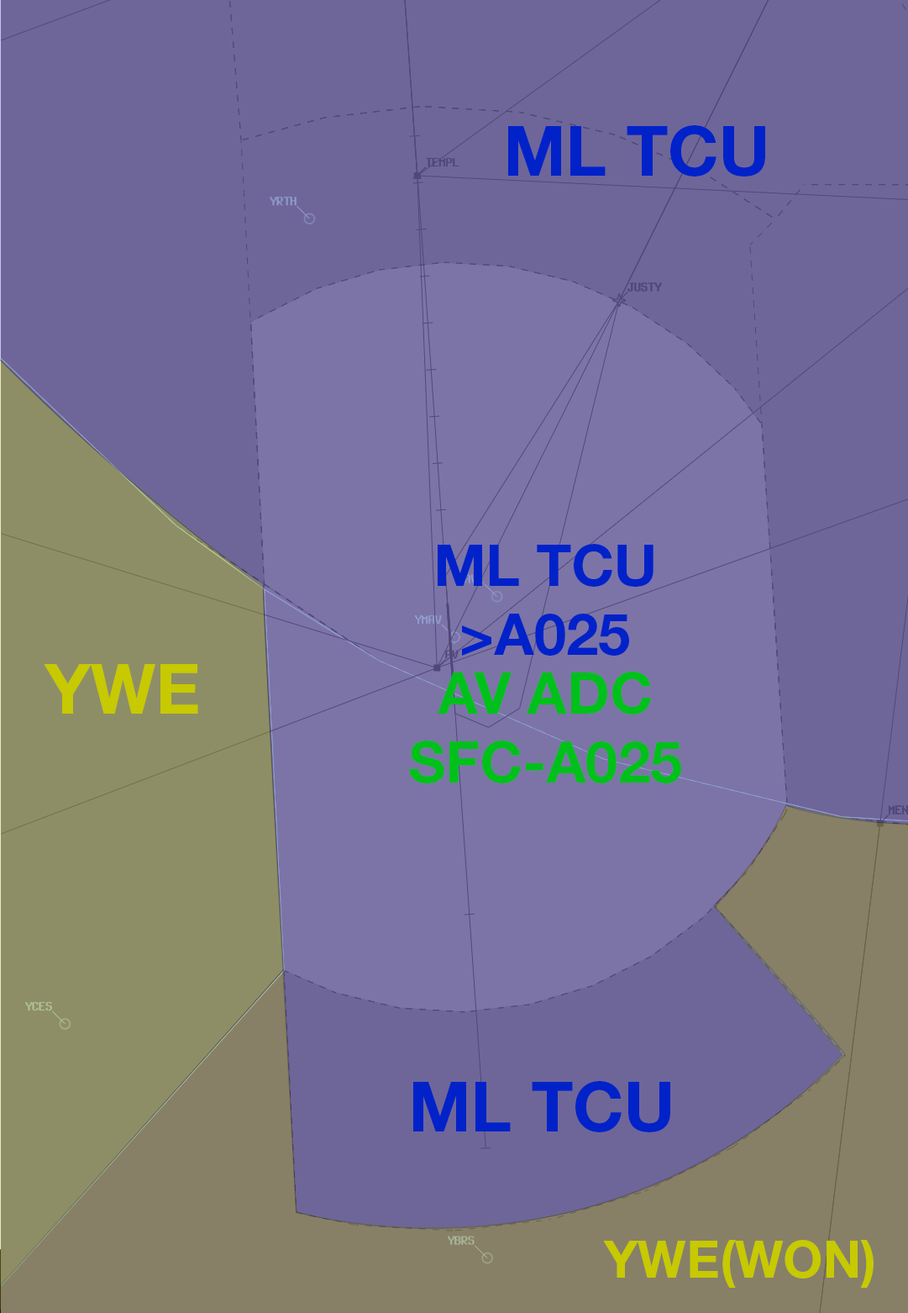
<style>
.page{position:relative;width:908px;height:1313px;background:#6e6699}
.page>*{position:absolute;margin:0}
.t1{font:69px "HelveticaNeueLTStd-Bd";color:#0122c9}
.t2{font:57.8px "HelveticaNeueLTStd-Bd";color:#0122c9}
.t3{font:69px "HelveticaNeueLTStd-Bd";color:#c7c901}
.t4{font:57.8px "HelveticaNeueLTStd-Bd";color:#00c01b}
.t5{font:51.4px "HelveticaNeueLTStd-Bd";color:#c7c901}
</style>
<div class="page">
<p class="t1" style="left:508px;top:125px;width:258px;height:51px">ML TCU</p>
<p class="t2" style="left:438px;top:544px;width:216px;height:111px;text-align:center">ML TCU<br>&gt;A025</p>
<p class="t3" style="left:44px;top:664px;width:154px;height:49px">YWE</p>
<p class="t4" style="left:409px;top:671px;width:273px;height:112px;text-align:center">AV ADC<br>SFC-A025</p>
<p class="t1" style="left:413px;top:1081px;width:258px;height:51px">ML TCU</p>
<p class="t5" style="left:603px;top:1240px;width:271px;height:47px">YWE(WON)</p>
</div>
